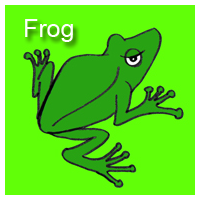
<style>
.page{position:relative;width:200px;height:200px;background:#61ff08}
.page>*{position:absolute;margin:0}
.t1{font:25px "ArialMT";color:#ffffff}
</style>
<div class="page">
<p class="t1" style="left:25px;top:19px;width:48px;height:23px">Frog</p>
</div>
